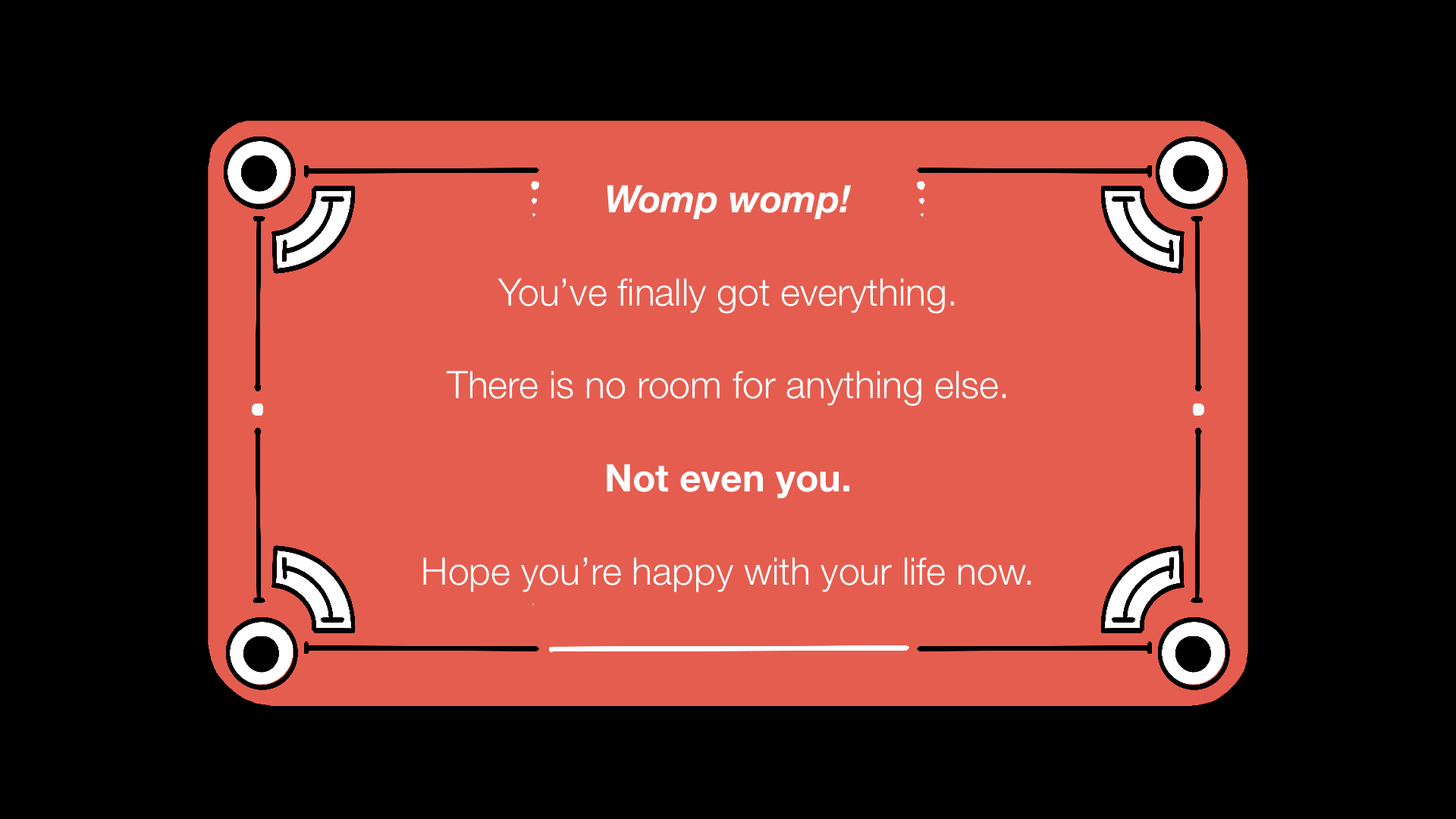
<style>
.page{position:relative;width:1456px;height:819px;background:#000000}
.page>*{position:absolute;margin:0}
.t1{font:37.9px "HelveticaNeue-Light";color:#ffffff}
.t2{font:37.9px "HelveticaNeue-BoldItalic";color:#ffffff}
.t3{font:37.9px "HelveticaNeue-Bold";color:#ffffff}
</style>
<div class="page">
<p class="t1" style="left:0px;top:0px;width:1456px;height:819px;text-align:center"><span class="t2">Womp womp!</span><br><br>You’ve finally got everything.<br><br>There is no room for anything else.<br><br><span class="t3">Not even you.</span><br><br>Hope you’re happy with your life now.</p>
</div>
